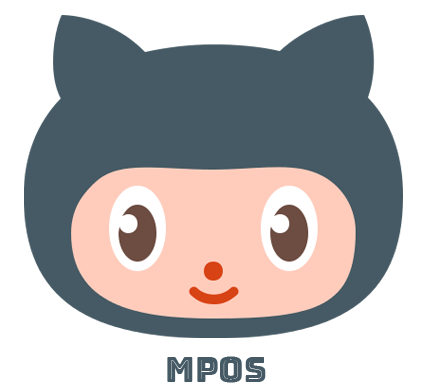
<style>
.page{position:relative;width:424px;height:392px;background:#ffffff}
.page>*{position:absolute;margin:0}
.t1{font:34.9px "BungeeInline-Regular";color:#455a64}
</style>
<div class="page">
<p class="t1" style="left:167px;top:356px;width:99px;height:27px">MPOS</p>
</div>
